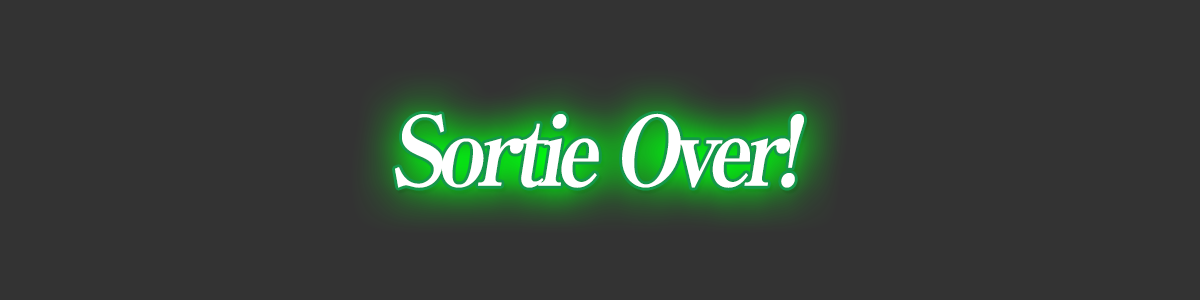
<style>
.page{position:relative;width:1200px;height:300px;background:#333333}
.page>*{position:absolute;margin:0}
.t1{font:96px "RyuminPro-ExBold";letter-spacing:-0.08em;color:#ffffff;font-style:italic;scale:0.9 1}
</style>
<div class="page">
<p class="t1" style="left:395px;top:113px;width:409px;height:75px">Sortie Over!</p>
</div>
